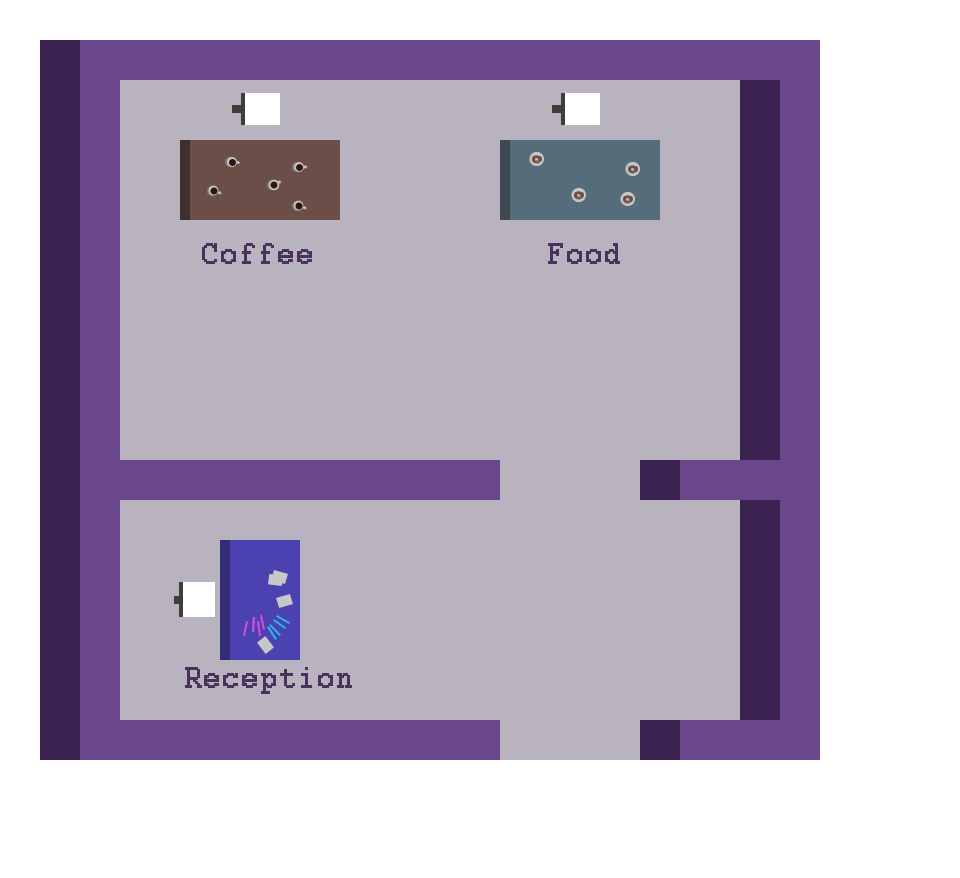
<style>
.page{position:relative;width:960px;height:878px;background:#b9b2bf}
.page>*{position:absolute;margin:0}
.t1{font:33.3px "Courier";color:#49335c;font-weight:bold}
</style>
<div class="page">
<p class="t1" style="left:202px;top:243px;width:110px;height:21px">Coffee</p>
<p class="t1" style="left:548px;top:243px;width:72px;height:21px">Food</p>
<p class="t1" style="left:185px;top:667px;width:167px;height:27px">Reception</p>
</div>
